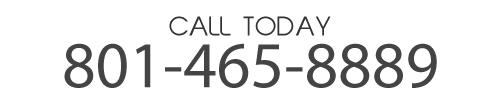
<style>
.page{position:relative;width:500px;height:109px;background:#ffffff}
.page>*{position:absolute;margin:0}
.t1{font:65.7px "MyriadPro-Regular";color:#454444}
</style>
<div class="page">
<p class="t1" style="left:64px;top:43px;width:373px;height:45px">801-465-8889</p>
</div>
